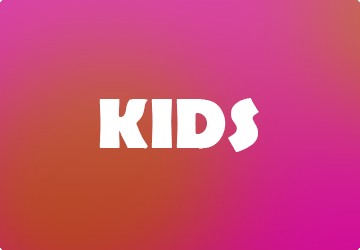
<style>
.page{position:relative;width:360px;height:250px}
.page>*{position:absolute;margin:0}
.t1{font:72px "BerlinSansFB-Bold";color:#ffffff}
</style>
<div class="page">
<p class="t1" style="left:99px;top:98px;width:160px;height:54px">KIDS</p>
</div>
